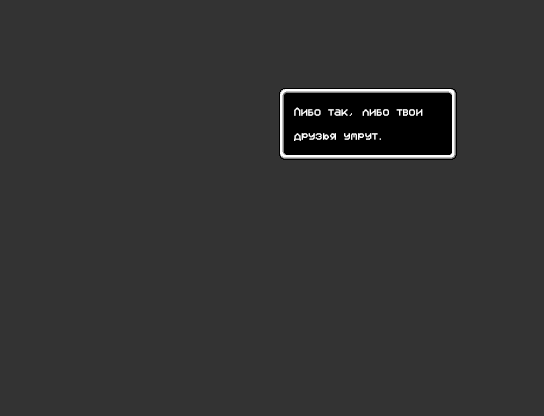
<style>
.page{position:relative;width:544px;height:416px;background:#333333}
.page>*{position:absolute;margin:0}
.t1{font:12px/24px "VCROSDMono";color:#ffffff}
</style>
<div class="page">
<p class="t1" style="left:294px;top:107px;width:129px;height:34px">Либо так, либо твои<br>друзья умрут.</p>
</div>
